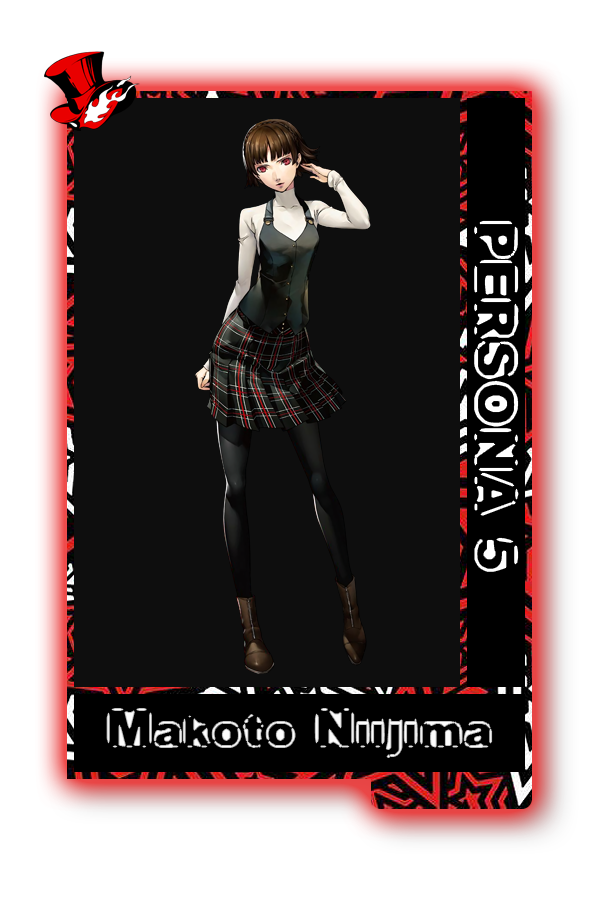
<style>
.page{position:relative;width:600px;height:900px;background:#0e0e0e}
.page>*{position:absolute;margin:0}
.t1{font:41.7px "Untitled";color:#ffffff}
.t2{font:37.5px "Untitled";color:#fdfdfd}
</style>
<div class="page">
<p class="t1" style="left:475px;top:221px;width:43px;height:350px;rotate:90deg">PERSONA 5</p>
<p class="t2" style="left:107px;top:709px;width:385px;height:48px">Makoto Niijima</p>
</div>
